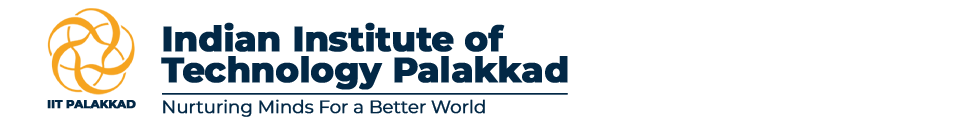
<style>
.page{position:relative;width:958px;height:125px;background:#ffffff}
.page>*{position:absolute;margin:0}
.t1{font:35.1px/31.3px "Montserrat-ExtraBold";letter-spacing:-0.02em;color:#022846;font-weight:bold}
.t2{font:11.6px "Montserrat-ExtraBold";letter-spacing:-0.02em;color:#022846;text-transform:uppercase;font-weight:bold}
.t3{font:18px "Montserrat-Regular";letter-spacing:-0.02em;color:#022846;font-weight:bold}
</style>
<div class="page">
<p class="t1" style="left:161px;top:22px;width:407px;height:68px">Indian Institute of <br>Technology Palakkad</p>
<p class="t2" style="left:47px;top:100px;width:89px;height:9px">iit palakkad</p>
<p class="t3" style="left:163px;top:99px;width:322px;height:18px">Nurturing Minds For a Better World</p>
</div>
